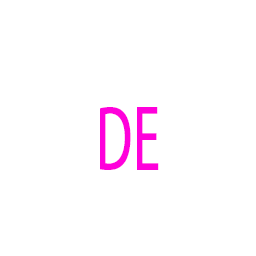
<style>
.page{position:relative;width:256px;height:256px;background:#ffffff}
.page>*{position:absolute;margin:0}
.t1{font:82px "KozGoPr6N-Regular";color:#ff00db;font-weight:bold;scale:0.6 1}
</style>
<div class="page">
<p class="t1" style="left:100px;top:107px;width:59px;height:63px">DE</p>
</div>
